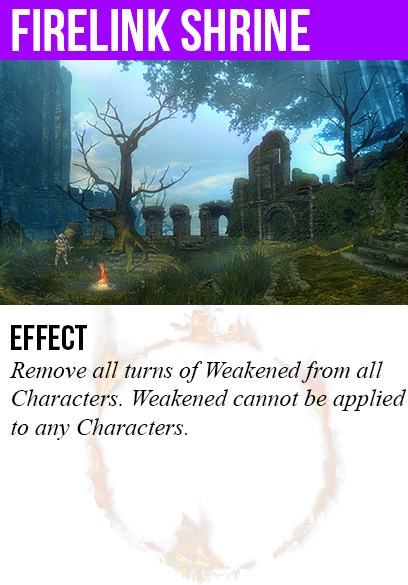
<style>
.page{position:relative;width:408px;height:585px;background:#ffffff}
.page>*{position:absolute;margin:0}
.t1{font:60px "BebasNeue";color:#ffffff}
.t2{font:36px "BebasNeue";color:#000000}
.t3{font:24px "TimesNewRomanPS-ItalicMT";color:#000000}
</style>
<div class="page">
<p class="t1" style="left:12px;top:9px;width:298px;height:42px">firelink shrine</p>
<p class="t2" style="left:11px;top:325px;width:76px;height:25px">Effect</p>
<p class="t3" style="left:9px;top:361px;width:398px;height:79px">Remove all turns of Weakened from all<br>Characters. Weakened cannot be applied<br>to any Characters.</p>
</div>
